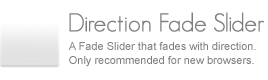
<style>
.page{position:relative;width:268px;height:80px;background:#ffffff}
.page>*{position:absolute;margin:0}
.t1{font:25.3px "GeosansLight";color:#7f7f7f}
.t2{font:11px "ArialMT";color:#7f7f7f}
</style>
<div class="page">
<p class="t1" style="left:69px;top:12px;width:196px;height:20px">Direction Fade Slider</p>
<p class="t2" style="left:68px;top:42px;width:188px;height:25px">A Fade Slider that fades with direction.<br>Only recommended for new browsers.</p>
</div>
